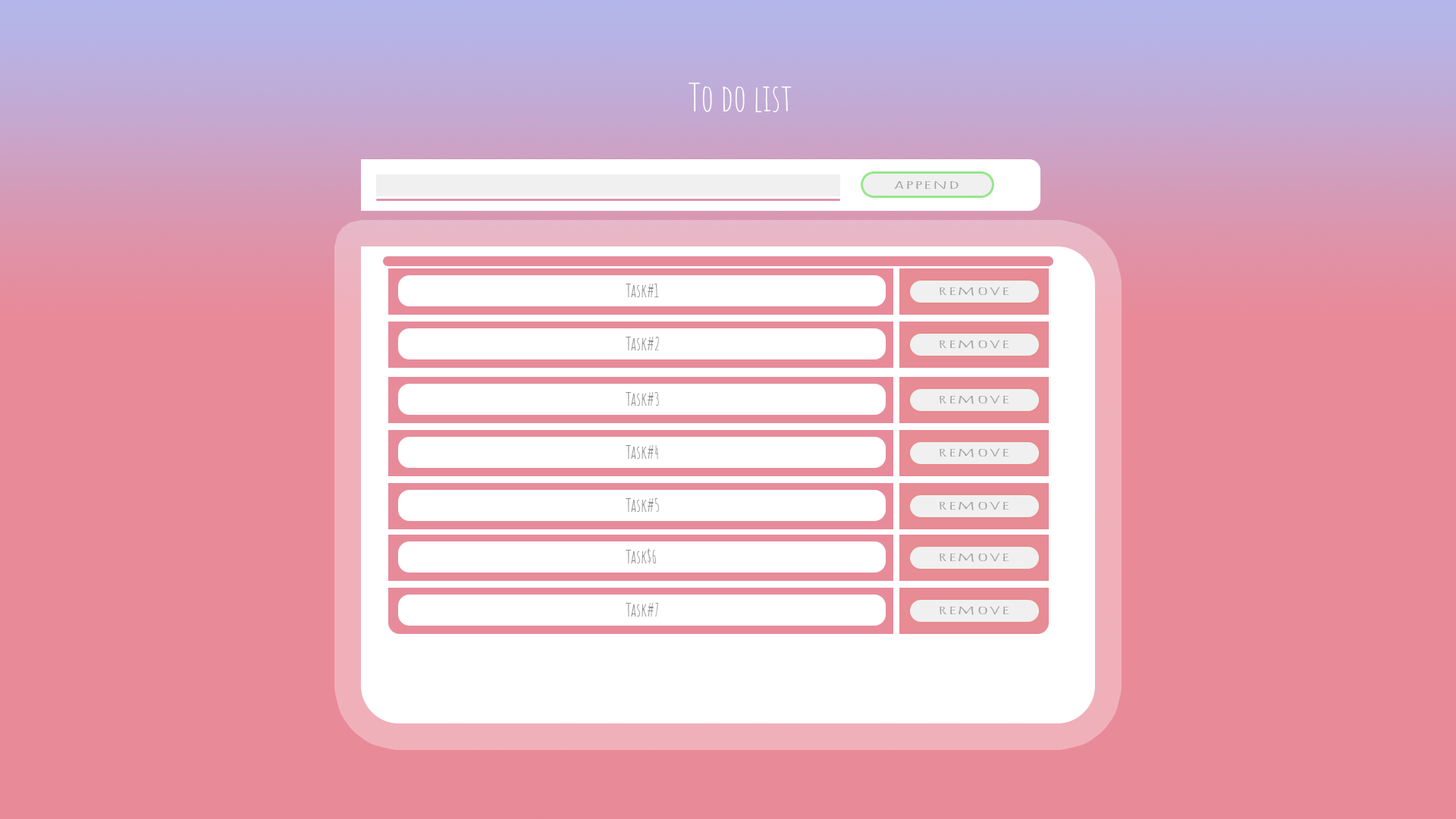
<style>
.page{position:relative;width:1456px;height:819px;background:#e98a98}
.page>*{position:absolute;margin:0}
.t1{font:37.9px "AmaticSC-Regular";color:#ffffff}
.t2{font:11.4px "AmaticSC-Regular";color:#a2a1a1;scale:3.09 1}
.t3{font:18.2px "AmaticSC-Regular";color:#8e8e8e}
</style>
<div class="page">
<p class="t1" style="left:689px;top:83px;width:103px;height:29px">To do list</p>
<p class="t2" style="left:894px;top:181px;width:65px;height:8px">append</p>
<p class="t3" style="left:626px;top:284px;width:33px;height:13px">Task#1</p>
<p class="t2" style="left:940px;top:287px;width:69px;height:9px">remove</p>
<p class="t3" style="left:626px;top:337px;width:33px;height:13px">Task#2</p>
<p class="t2" style="left:940px;top:340px;width:69px;height:9px">remove</p>
<p class="t3" style="left:626px;top:392px;width:33px;height:14px">Task#3</p>
<p class="t2" style="left:940px;top:395px;width:69px;height:9px">remove</p>
<p class="t3" style="left:626px;top:445px;width:33px;height:15px">Task#4</p>
<p class="t2" style="left:940px;top:448px;width:69px;height:9px">remove</p>
<p class="t3" style="left:626px;top:498px;width:33px;height:14px">Task#5</p>
<p class="t2" style="left:940px;top:501px;width:69px;height:9px">remove</p>
<p class="t3" style="left:626px;top:548px;width:30px;height:15px">Task$6</p>
<p class="t2" style="left:940px;top:553px;width:69px;height:9px">remove</p>
<p class="t3" style="left:626px;top:603px;width:32px;height:14px">Task#7</p>
<p class="t2" style="left:940px;top:606px;width:69px;height:9px">remove</p>
</div>
